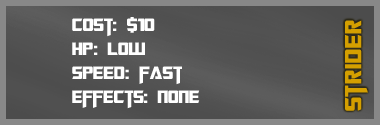
<style>
.page{position:relative;width:380px;height:125px}
.page>*{position:absolute;margin:0}
.t1{font:20px "TransformersMovie";color:#ffffff}
.t2{font:20px "TransformersMovie";letter-spacing:0.04em;color:#ffffff}
.t3{font:26px "TransformersMovie";letter-spacing:0.04em;color:#d49f00}
</style>
<div class="page">
<p class="t1" style="left:72px;top:17px;width:128px;height:92px">Cost: $10<br>h<span class="t2">p</span>: low<br>Spee<span class="t2">d</span>: fast<br>effects: none</p>
<p class="t3" style="left:345px;top:20px;width:23px;height:91px;rotate:-90deg">strider</p>
</div>
